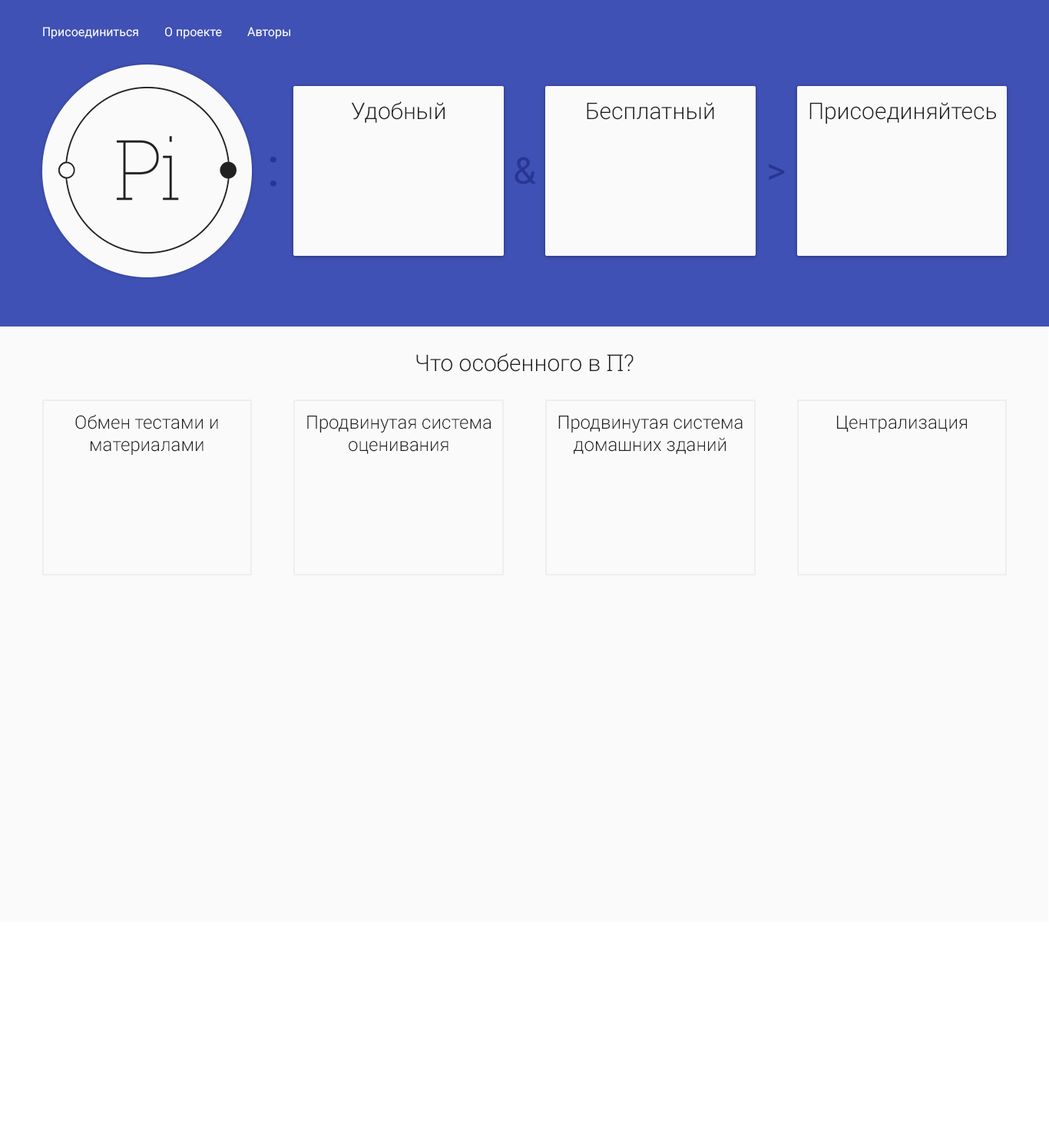
<style>
.page{position:relative;width:1049px;height:1137px;background:#fafafa}
.page>*{position:absolute;margin:0}
.t1{font:12.3px "Roboto-Regular";color:#fafafa}
.t2{font:23px "Roboto-Light";color:#212121}
.t3{font:55.3px "Roboto-Regular";color:#283593}
.t4{font:36.9px "Roboto-Regular";color:#283593}
.t5{font:23px "RobotoSlab-Light";color:#212121}
.t6{font:18.4px "Roboto-Light";color:#212121}
</style>
<div class="page">
<p class="t1" style="left:43px;top:27px;width:95px;height:12px">Присоединиться</p>
<p class="t1" style="left:165px;top:27px;width:57px;height:12px">О проекте</p>
<p class="t1" style="left:247px;top:27px;width:43px;height:12px">Авторы</p>
<p class="t2" style="left:351px;top:101px;width:94px;height:22px">Удобный</p>
<p class="t2" style="left:587px;top:102px;width:127px;height:18px">Бесплатный</p>
<p class="t2" style="left:809px;top:102px;width:187px;height:22px">Присоединяйтесь</p>
<p class="t3" style="left:270px;top:157px;width:6px;height:30px">:</p>
<p class="t4" style="left:515px;top:157px;width:21px;height:27px">&amp;</p>
<p class="t4" style="left:769px;top:164px;width:16px;height:16px">&gt;</p>
<p class="t2" style="left:416px;top:353px;width:218px;height:19px">Что особенного в <span class="t5">П?</span></p>
<p class="t6" style="left:75px;top:414px;width:143px;height:41px;text-align:center">Обмен тестами и материалами</p>
<p class="t6" style="left:307px;top:415px;width:185px;height:39px;text-align:center">Продвинутая система оценивания</p>
<p class="t6" style="left:558px;top:415px;width:185px;height:39px;text-align:center">Продвинутая система домашних зданий</p>
<p class="t6" style="left:837px;top:415px;width:130px;height:17px">Централизация</p>
</div>
